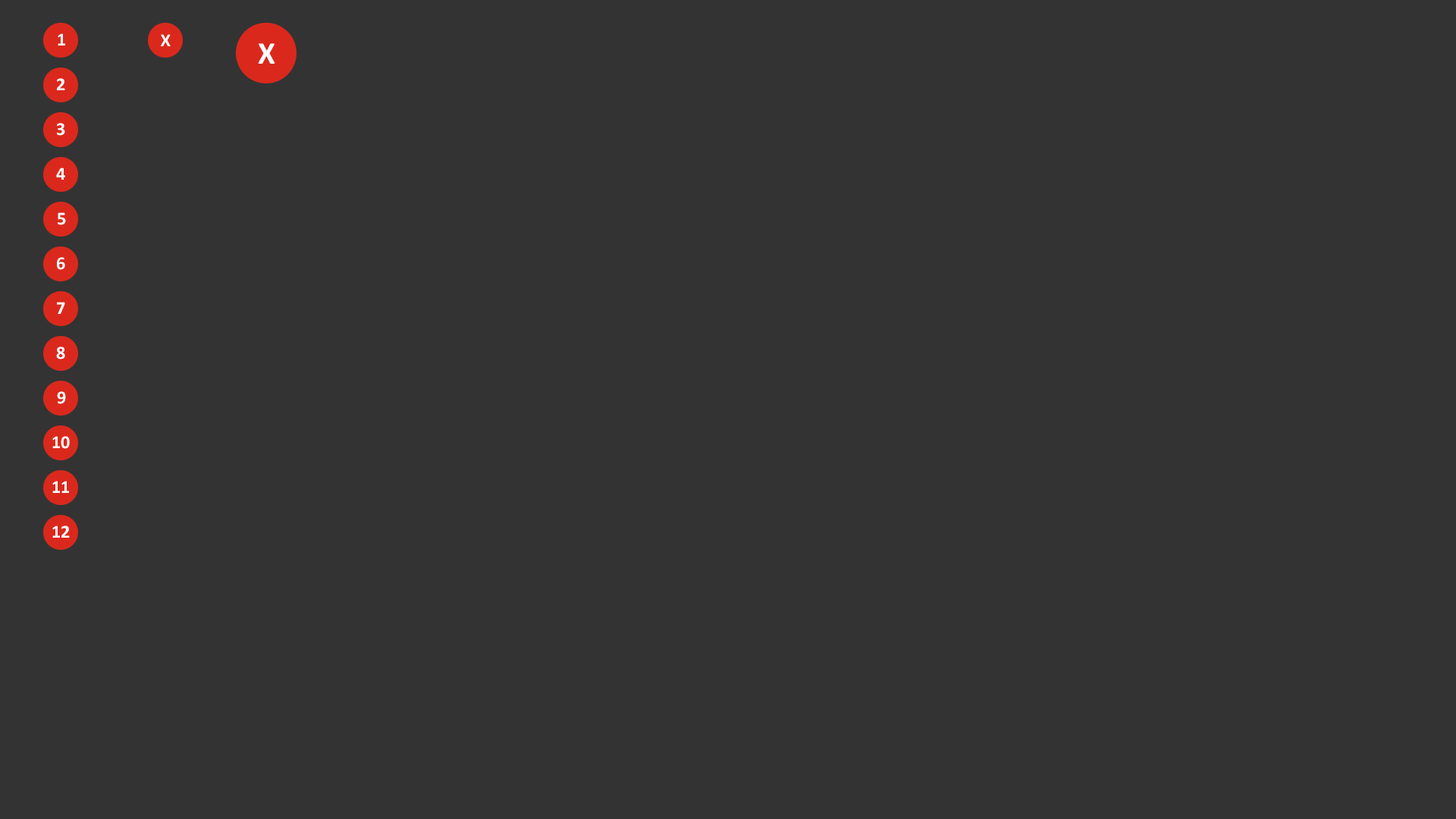
<style>
.page{position:relative;width:1456px;height:819px;background:#333333}
.page>*{position:absolute;margin:0}
.t1{font:18.2px "Calibri-Bold";color:#ffffff;text-transform:uppercase}
.t2{font:31.7px "Calibri-Bold";color:#ffffff;text-transform:uppercase}
</style>
<div class="page">
<p class="t1" style="left:58px;top:33px;width:7px;height:12px">1</p>
<p class="t1" style="left:161px;top:34px;width:10px;height:12px">x</p>
<p class="t2" style="left:258px;top:43px;width:17px;height:21px">x</p>
<p class="t1" style="left:57px;top:78px;width:8px;height:12px">2</p>
<p class="t1" style="left:57px;top:123px;width:8px;height:13px">3</p>
<p class="t1" style="left:56px;top:168px;width:9px;height:12px">4</p>
<p class="t1" style="left:58px;top:212px;width:8px;height:13px">5</p>
<p class="t1" style="left:57px;top:257px;width:8px;height:13px">6</p>
<p class="t1" style="left:57px;top:302px;width:8px;height:12px">7</p>
<p class="t1" style="left:56px;top:347px;width:9px;height:12px">8</p>
<p class="t1" style="left:57px;top:391px;width:9px;height:13px">9</p>
<p class="t1" style="left:52px;top:436px;width:18px;height:13px">10</p>
<p class="t1" style="left:52px;top:481px;width:17px;height:12px">11</p>
<p class="t1" style="left:52px;top:526px;width:18px;height:12px">12</p>
</div>
